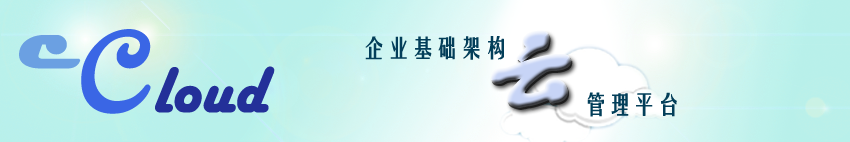
<style>
.page{position:relative;width:850px;height:142px}
.page>*{position:absolute;margin:0}
.t1{font:159.8px "Harrington";color:#3a66e5;font-weight:bold;font-style:italic}
.t2{font:94.3px "Magneto-Bold";color:#6ba0e2;font-weight:bold}
.t3{font:23.7px "FZYTK--GBK1-0";color:#033e59;font-weight:bold}
.t4{font:110.2px "FZSTK--GBK1-0";font-weight:bold;scale:1.2 1}
.t5{font:65.9px "HarlowSolid";color:#233099;font-weight:bold}
</style>
<div class="page">
<p class="t1" style="left:81px;top:29px;width:70px;height:85px;rotate:-5deg">c</p>
<p class="t2" style="left:19px;top:35px;width:62px;height:34px">c</p>
<p class="t3" style="left:365px;top:36px;width:139px;height:24px">企业基础架构</p>
<p class="t4" style="left:492px;top:32px;width:81px;height:78px">云</p>
<p class="t5" style="left:155px;top:66px;width:120px;height:47px">loud</p>
<p class="t3" style="left:587px;top:92px;width:90px;height:25px">管理平台</p>
</div>
